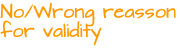
<style>
.page{position:relative;width:180px;height:48px;background:#ffffff}
.page>*{position:absolute;margin:0}
.t1{font:16px "ArchitectsDaughter";color:#ff9900}
</style>
<div class="page">
<p class="t1" style="left:0px;top:2px;width:176px;height:44px">No/Wrong reasson<br>for validity</p>
</div>
